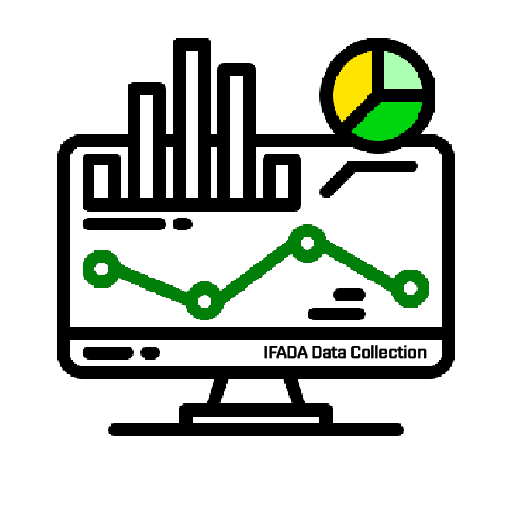
<style>
.page{position:relative;width:512px;height:512px;background:#ffffff}
.page>*{position:absolute;margin:0}
.t1{font:17.3px "Nippo-Regular";letter-spacing:-0.04em;color:#000000;font-weight:bold}
</style>
<div class="page">
<p class="t1" style="left:264px;top:345px;width:163px;height:14px">IFADA Data Collection</p>
</div>
